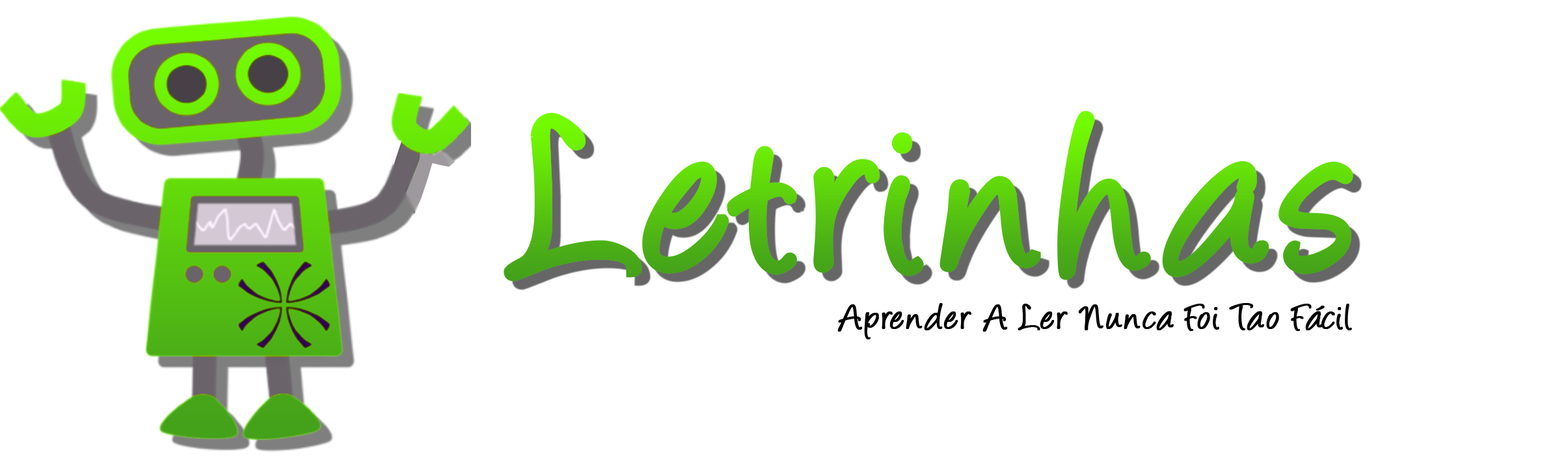
<style>
.page{position:relative;width:1568px;height:463px;background:#ffffff}
.page>*{position:absolute;margin:0}
.t1{font:260.2px "Angelina";font-weight:bold}
.t2{font:41.6px "Angelina";color:#000000;font-weight:bold}
</style>
<div class="page">
<p class="t1" style="left:504px;top:111px;width:849px;height:171px">Letrinhas</p>
<p class="t2" style="left:837px;top:303px;width:515px;height:37px">Aprender A Ler Nunca Foi Tao Fácil</p>
</div>
